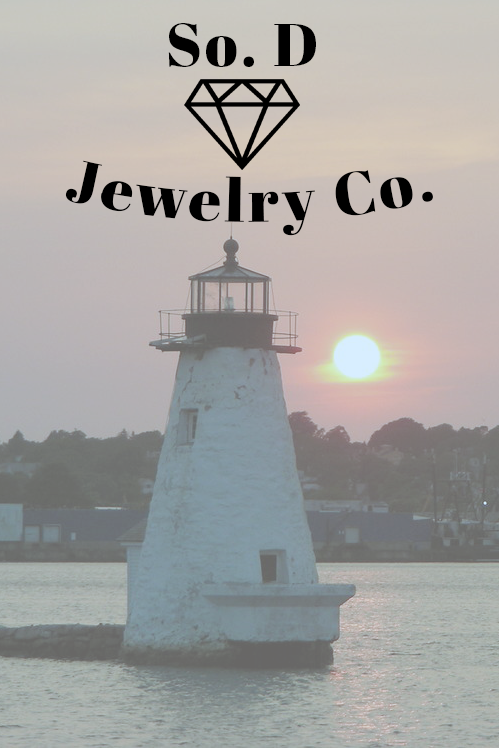
<style>
.page{position:relative;width:499px;height:748px}
.page>*{position:absolute;margin:0}
.t1{font:60px "AbrilFatface-Regular";letter-spacing:0.05em;color:#000000}
</style>
<div class="page">
<p class="t1" style="left:168px;top:23px;width:148px;height:44px">So. D</p>
<p class="t1" style="left:65px;top:160px;width:368px;height:76px">Jewelry Co.</p>
</div>
